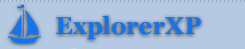
<style>
.page{position:relative;width:245px;height:49px;background:#b5c9e2}
.page>*{position:absolute;margin:0}
.t1{font:14px "SCByTheSea";color:#1374ec}
.t2{font:24px "Georgia-Bold";color:#1374ec}
</style>
<div class="page">
<p class="t1" style="left:8px;top:4px;width:34px;height:39px">t</p>
<p class="t2" style="left:56px;top:15px;width:145px;height:25px">ExplorerXP</p>
</div>
